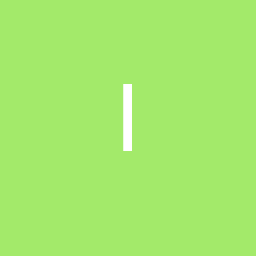
<style>
.page{position:relative;width:256px;height:256px;background:#a3ea6a}
.page>*{position:absolute;margin:0}
.t1{font:100px "MyriadPro-Regular";color:#ffffff}
</style>
<div class="page">
<p class="t1" style="left:123px;top:84px;width:9px;height:67px">I</p>
</div>
